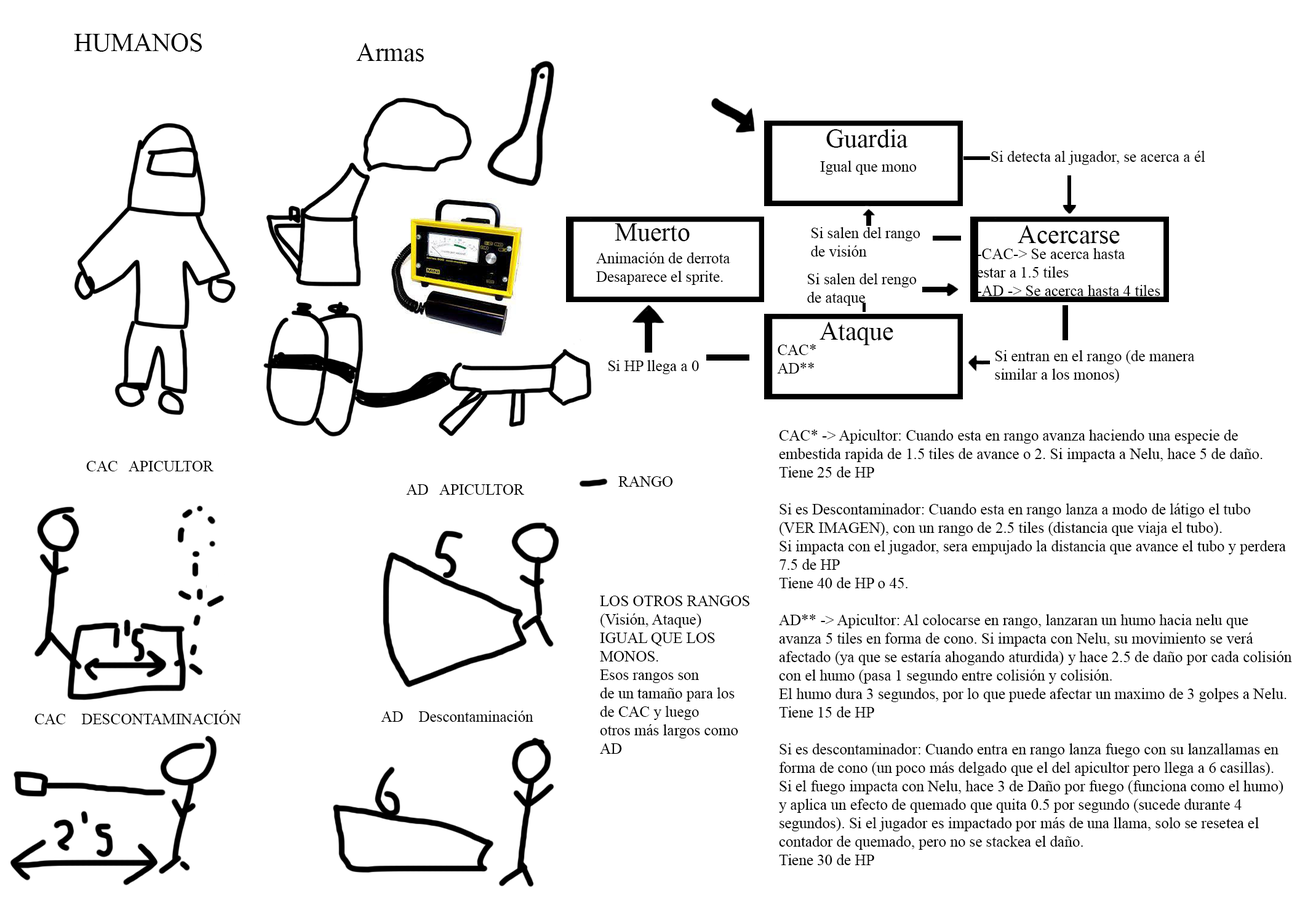
<style>
.page{position:relative;width:1292px;height:923px;background:#ffffff}
.page>*{position:absolute;margin:0}
.t1{font:25.6px "TimesNewRomanPSMT";color:#000000}
.t2{font:15.4px "TimesNewRomanPSMT";color:#000000}
</style>
<div class="page">
<p class="t1" style="left:74px;top:33px;width:128px;height:19px">HUMANOS</p>
<p class="t1" style="left:356px;top:43px;width:68px;height:19px">Armas</p>
<p class="t1" style="left:826px;top:129px;width:82px;height:19px">Guardia</p>
<p class="t2" style="left:820px;top:161px;width:97px;height:14px">Igual que mono</p>
<p class="t2" style="left:991px;top:151px;width:214px;height:14px">Si detecta al jugador, se acerca a él</p>
<p class="t1" style="left:615px;top:223px;width:75px;height:18px">Muerto</p>
<p class="t2" style="left:811px;top:227px;width:109px;height:30px">Si salen del rango<br>de visión</p>
<p class="t1" style="left:1018px;top:225px;width:102px;height:19px">Acercarse</p>
<p class="t2" style="left:596px;top:252px;width:134px;height:33px">Animación de derrota<br>Desaparece el sprite.</p>
<p class="t2" style="left:977px;top:248px;width:183px;height:48px">-CAC-&gt; Se acerca hasta <br>estar a 1.5 tiles<br>-AD -&gt; Se acerca hasta 4 tiles</p>
<p class="t2" style="left:807px;top:273px;width:110px;height:33px">Si salen del rengo<br>de ataque</p>
<p class="t1" style="left:820px;top:322px;width:73px;height:23px">Ataque</p>
<p class="t2" style="left:777px;top:344px;width:39px;height:29px">CAC*<br>AD**</p>
<p class="t2" style="left:995px;top:350px;width:200px;height:33px">Si entran en el rango (de manera<br>similar a los monos)</p>
<p class="t2" style="left:608px;top:360px;width:91px;height:14px">Si HP llega a 0</p>
<p class="t2" style="left:779px;top:429px;width:513px;height:436px">CAC* -&gt; Apicultor: Cuando esta en rango avanza haciendo una especie de<br>embestida rapida de 1.5 tiles de avance o 2. Si impacta a Nelu, hace 5 de daño.<br>Tiene 25 de HP<br><br>Si es Descontaminador: Cuando esta en rango lanza a modo de látigo el tubo<br>(VER IMAGEN), con un rango de 2.5 tiles (distancia que viaja el tubo).<br>Si impacta con el jugador, sera empujado la distancia que avance el tubo y perdera<br>7.5 de HP<br>Tiene 40 de HP o 45.<br><br>AD** -&gt; Apicultor: Al colocarse en rango, lanzaran un humo hacia nelu que <br>avanza 5 tiles en forma de cono. Si impacta con Nelu, su movimiento se verá <br>afectado (ya que se estaría ahogando aturdida) y hace 2.5 de daño por cada colisión<br>con el humo (pasa 1 segundo entre colisión y colisión.<br>El humo dura 3 segundos, por lo que puede afectar un maximo de 3 golpes a Nelu.<br>Tiene 15 de HP<br><br>Si es descontaminador: Cuando entra en rango lanza fuego con su lanzallamas en <br>forma de cono (un poco más delgado que el del apicultor pero llega a 6 casillas).<br>Si el fuego impacta con Nelu, hace 3 de Daño por fuego (funciona como el humo)<br>y aplica un efecto de quemado que quita 0.5 por segundo (sucede durante 4 <br>segundos). Si el jugador es impactado por más de una llama, solo se resetea el<br>contador de quemado, pero no se stackea el daño.<br>Tiene 30 de HP</p>
<p class="t2" style="left:86px;top:461px;width:127px;height:10px">CAC   APICULTOR</p>
<p class="t2" style="left:406px;top:484px;width:118px;height:11px">AD   APICULTOR</p>
<p class="t2" style="left:618px;top:476px;width:55px;height:11px">RANGO</p>
<p class="t2" style="left:600px;top:596px;width:150px;height:158px">LOS OTROS RANGOS<br>(Visión, Ataque)<br>IGUAL QUE LOS<br>MONOS.<br>Esos rangos son<br>de un tamaño para los<br>de CAC y luego <br>otros más largos como<br>AD</p>
<p class="t2" style="left:34px;top:710px;width:207px;height:15px">CAC    DESCONTAMINACIÓN</p>
<p class="t2" style="left:381px;top:711px;width:152px;height:11px">AD    Descontaminación</p>
</div>
